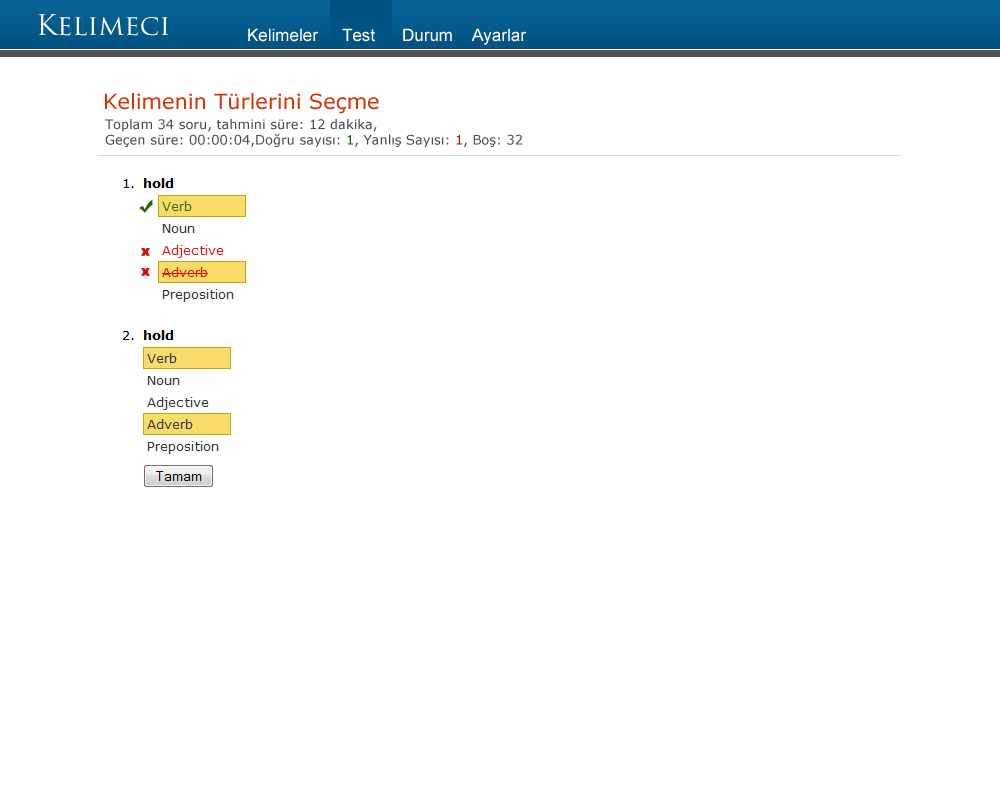
<style>
.page{position:relative;width:1000px;height:800px;background:#ffffff}
.page>*{position:absolute;margin:0}
.t1{font:28px "TrajanPro-Regular";color:#ffffff}
.t2{font:17px "ArialMT";color:#ffffff}
.t3{font:21px "Verdana";color:#d63408}
.t4{font:13px "Verdana";color:#4a4a4a}
.t5{font:13px "Verdana";color:#196003}
.t6{font:13px "Verdana";color:#c70505}
</style>
<div class="page">
<p class="t1" style="left:38px;top:14px;width:131px;height:22px">Kelimeci</p>
<p class="t2" style="left:248px;top:28px;width:71px;height:14px">Kelimeler</p>
<p class="t2" style="left:342px;top:28px;width:33px;height:14px">Test</p>
<p class="t2" style="left:403px;top:28px;width:49px;height:14px">Durum</p>
<p class="t2" style="left:471px;top:28px;width:56px;height:17px">Ayarlar</p>
<p class="t3" style="left:105px;top:93px;width:274px;height:21px">Kelimenin Türlerini Seçme</p>
<p class="t4" style="left:105px;top:119px;width:418px;height:28px">Toplam 34 soru, tahmini süre: 12 dakika,<br>Geçen süre: 00:00:04,Doğru sayısı: <span class="t5">1</span>, Yanlış Sayısı: <span class="t6">1</span>, Boş: 32</p>
</div>
